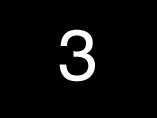
<style>
.page{position:relative;width:157px;height:118px;background:#000000}
.page>*{position:absolute;margin:0}
.t1{font:72px "Helvetica";color:#ffffff}
</style>
<div class="page">
<p class="t1" style="left:59px;top:29px;width:36px;height:53px">3</p>
</div>
